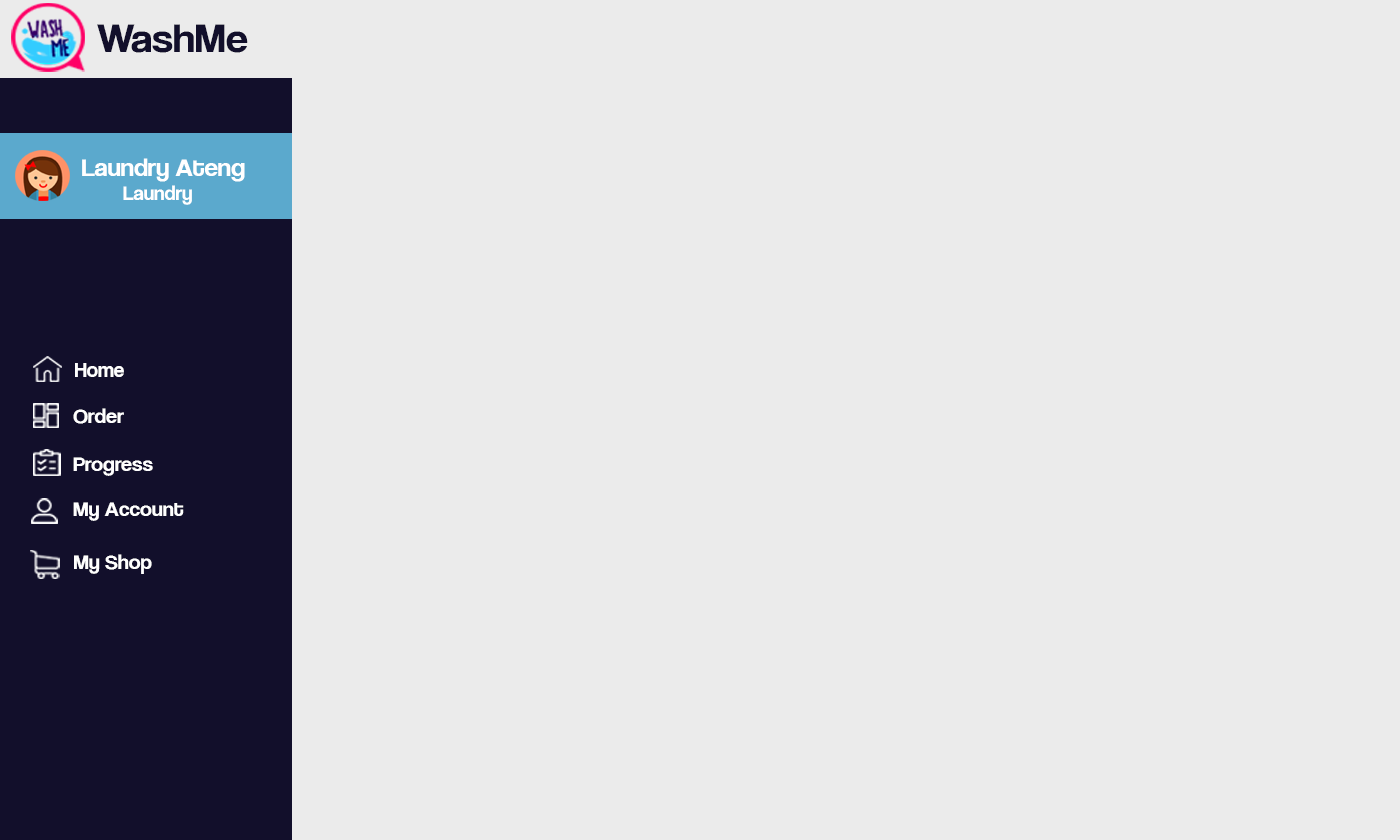
<style>
.page{position:relative;width:1400px;height:840px;background:#ebebeb}
.page>*{position:absolute;margin:0}
.t1{font:42.1px "CoolveticaRg-Regular";color:#120f2b;scale:1.05 1}
.t2{font:25.2px "CoolveticaRg-Regular";color:#ffffff;scale:1.05 1}
.t3{font:20px "CoolveticaRg-Regular";color:#ffffff;scale:1.05 1}
.t4{font:21px "CoolveticaRg-Regular";color:#ffffff}
.t5{font:21px "CoolveticaRg-Regular";color:#ffffff;scale:1.05 1}
</style>
<div class="page">
<p class="t1" style="left:97px;top:24px;width:151px;height:29px">WashMe</p>
<p class="t2" style="left:82px;top:158px;width:163px;height:47px">Laundry Ateng<br><span class="t3">        Laundry</span></p>
<p class="t4" style="left:75px;top:363px;width:49px;height:14px">Home</p>
<p class="t5" style="left:73px;top:408px;width:51px;height:16px">Order</p>
<p class="t5" style="left:73px;top:457px;width:80px;height:19px">Progress</p>
<p class="t5" style="left:73px;top:502px;width:111px;height:19px">My Account</p>
<p class="t5" style="left:74px;top:554px;width:78px;height:20px">My Shop</p>
</div>
